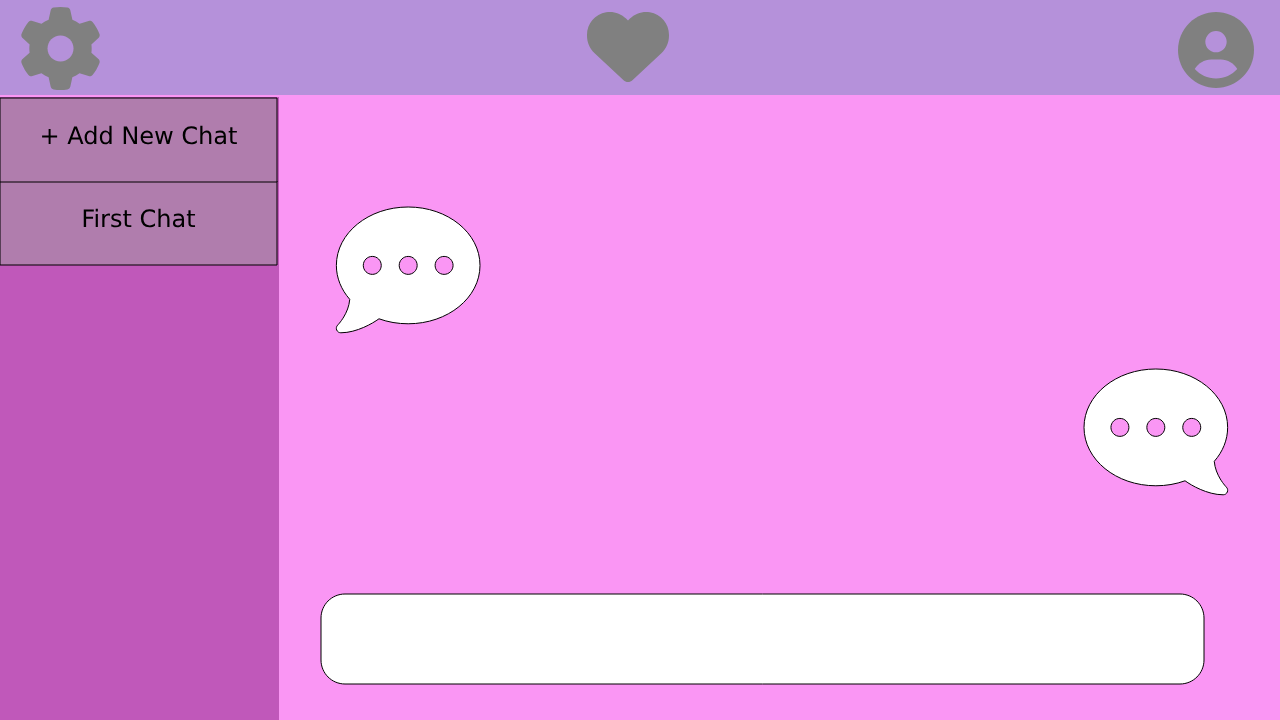
<style>
.page{position:relative;width:1280px;height:720px;background:#fa96f4}
.page>*{position:absolute;margin:0}
.t1{font:24px "DejaVuSans";color:#000000}
</style>
<div class="page">
<p class="t1" style="left:42px;top:125px;width:195px;height:20px">+ Add New Chat</p>
<p class="t1" style="left:83px;top:208px;width:113px;height:20px">First Chat</p>
</div>
